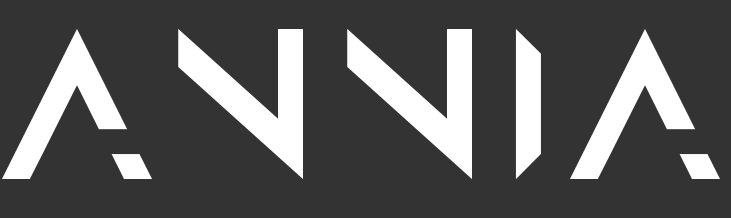
<style>
.page{position:relative;width:731px;height:218px;background:#333333}
.page>*{position:absolute;margin:0}
.t1{font:187.5px "Anurati-Regular";letter-spacing:-0.08em;color:#ffffff}
.t2{font:187.5px "Anurati-Regular";letter-spacing:0.08em;color:#ffffff}
.t3{font:187.5px "Anurati-Regular";letter-spacing:0.085em;color:#ffffff}
.t4{font:187.5px "Anurati-Regular";letter-spacing:0.1em;color:#ffffff}
.t5{font:187.5px "Anurati-Regular";letter-spacing:0.14em;color:#ffffff}
</style>
<div class="page">
<p class="t1" style="left:2px;top:29px;width:718px;height:150px">A <span class="t2">N</span><span class="t3">N</span><span class="t4">I</span><span class="t5">A</span></p>
</div>
